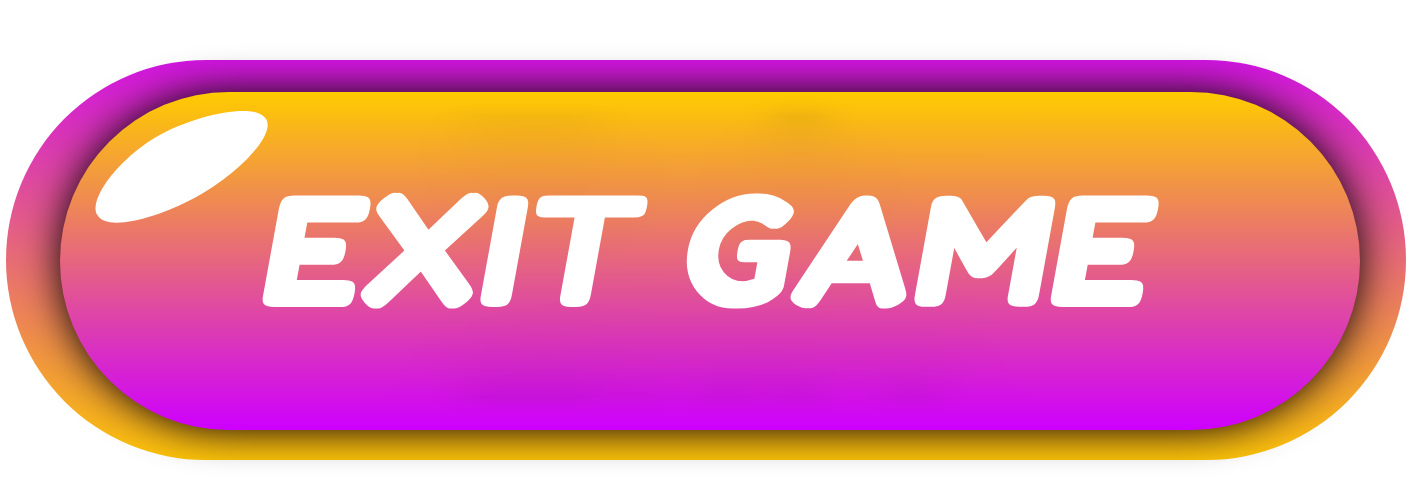
<style>
.page{position:relative;width:1420px;height:504px;background:#ffffff}
.page>*{position:absolute;margin:0}
.t1{font:152px "FredokaOne-Regular";color:#ffffff;font-weight:bold;font-style:italic}
</style>
<div class="page">
<p class="t1" style="left:262px;top:192px;width:897px;height:117px">EXIT GAME</p>
</div>
